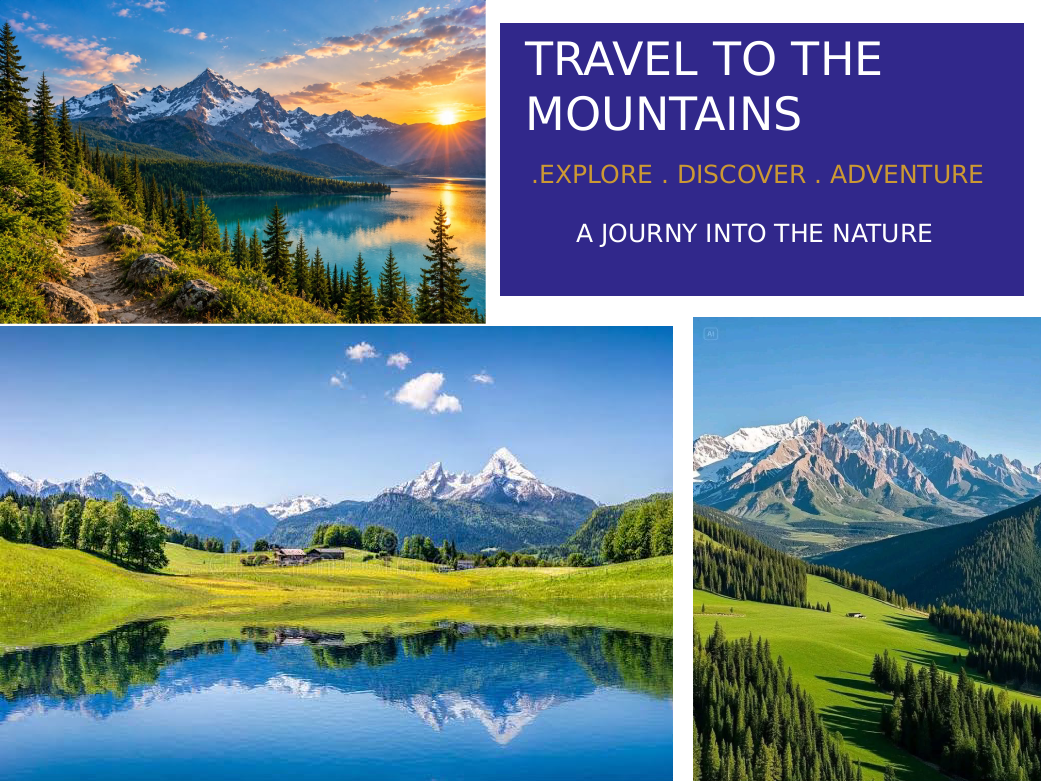
<style>
.page{position:relative;width:1041px;height:781px}
.page>*{position:absolute;margin:0}
.t1{font:46px "Arial";color:#ffffff}
.t2{font:25px "Arial";color:#cc9933}
.t3{font:25px "Arial";color:#ffffff}
</style>
<div class="page">
<p class="t1" style="left:524px;top:40px;width:357px;height:91px">TRAVEL TO THE <br>MOUNTAINS</p>
<p class="t2" style="left:533px;top:164px;width:450px;height:20px">.EXPLORE . DISCOVER . ADVENTURE</p>
<p class="t3" style="left:576px;top:223px;width:356px;height:25px">A JOURNY INTO THE NATURE</p>
</div>
